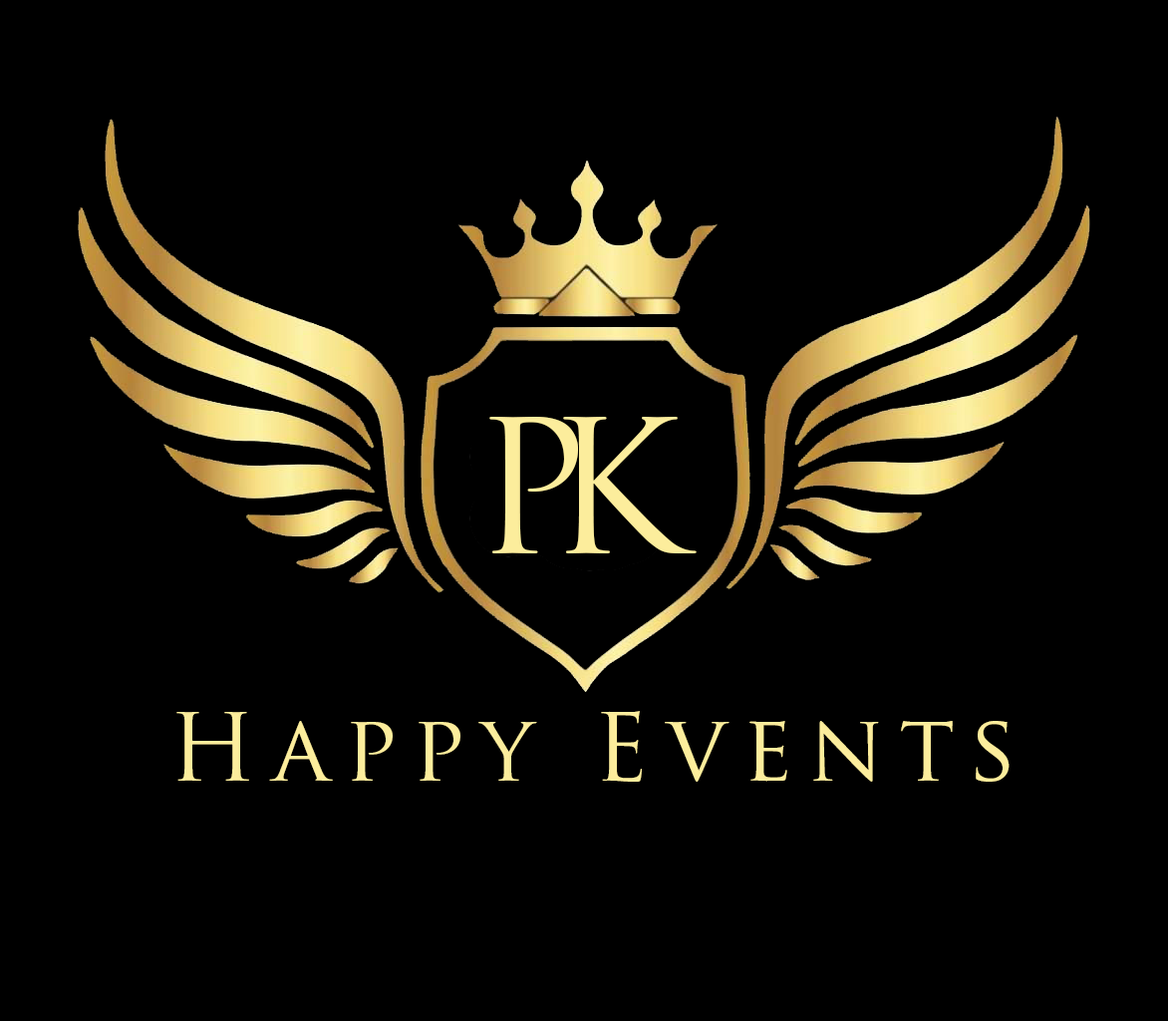
<style>
.page{position:relative;width:1168px;height:1021px;background:#000000}
.page>*{position:absolute;margin:0}
.t1{font:179.4px "TrajanPro-Regular";letter-spacing:-0.215em;color:#fced9c}
.t2{font:91.7px "TrajanPro-Regular";letter-spacing:0.165em;color:#fced9c}
</style>
<div class="page">
<p class="t1" style="left:489px;top:417px;width:208px;height:136px">PK</p>
<p class="t2" style="left:176px;top:711px;width:834px;height:70px">Happy Events</p>
</div>
